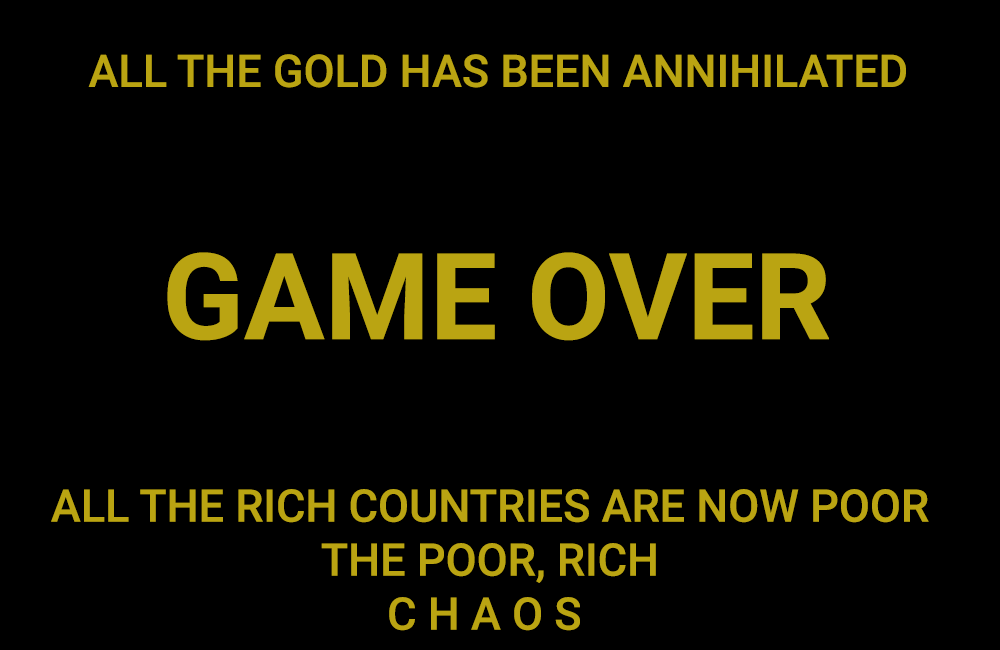
<style>
.page{position:relative;width:1000px;height:650px;background:#000000}
.page>*{position:absolute;margin:0}
.t1{font:45px "Roboto-Medium";color:#baa412}
.t2{font:120px "Roboto-Bold";color:#baa412}
</style>
<div class="page">
<p class="t1" style="left:88px;top:54px;width:818px;height:34px">ALL THE GOLD HAS BEEN ANNIHILATED</p>
<p class="t2" style="left:167px;top:252px;width:662px;height:89px">GAME OVER</p>
<p class="t1" style="left:51px;top:489px;width:878px;height:142px;text-align:center">ALL THE RICH COUNTRIES ARE NOW POOR<br>THE POOR, RICH<br>C H A O S</p>
</div>
